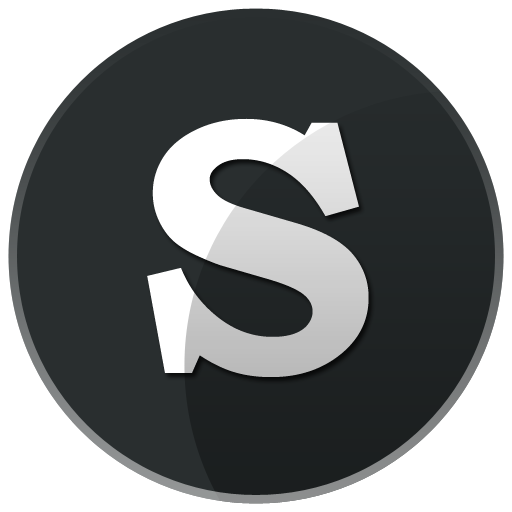
<style>
.page{position:relative;width:512px;height:512px;background:#ffffff}
.page>*{position:absolute;margin:0}
.t1{font:366.7px "BookmanOldStyle-Bold"}
</style>
<div class="page">
<p class="t1" style="left:147px;top:118px;width:222px;height:259px">S</p>
</div>
